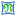
<style>
.page{position:relative;width:16px;height:16px;background:#ffffff}
.page>*{position:absolute;margin:0}
.t1{font:18px "MapInfoCartographic";color:#3f78b9}
.t2{font:11px "EuclidFraktur";color:#00b200}
</style>
<div class="page">
<p class="t1" style="left:1px;top:1px;width:14px;height:14px">&amp;</p>
<p class="t2" style="left:3px;top:4px;width:10px;height:8px">N</p>
</div>
